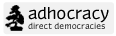
<style>
.page{position:relative;width:116px;height:36px;background:#f1f1f1}
.page>*{position:absolute;margin:0}
.t1{font:16px "Myndraine";color:#000000}
.t2{font:8px "Myndraine";letter-spacing:0.01em}
</style>
<div class="page">
<p class="t1" style="left:28px;top:7px;width:81px;height:16px">adhocracy</p>
<p class="t2" style="left:28px;top:22px;width:77px;height:7px">direct democracies</p>
</div>
